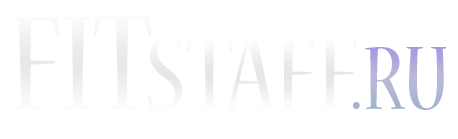
<style>
.page{position:relative;width:458px;height:139px;background:#ffffff}
.page>*{position:absolute;margin:0}
.t1{font:150px "NuevaStd-Cond";color:#f1f3f2}
.t2{font:120px "NuevaStd-Cond";color:#f1f1f1}
.t3{font:100px "NuevaStd-Cond";color:#b1b3d9}
</style>
<div class="page">
<p class="t1" style="left:12px;top:16px;width:139px;height:94px">FIT</p>
<p class="t2" style="left:148px;top:34px;width:209px;height:78px">STAFF</p>
<p class="t3" style="left:353px;top:47px;width:94px;height:63px">.RU</p>
</div>
